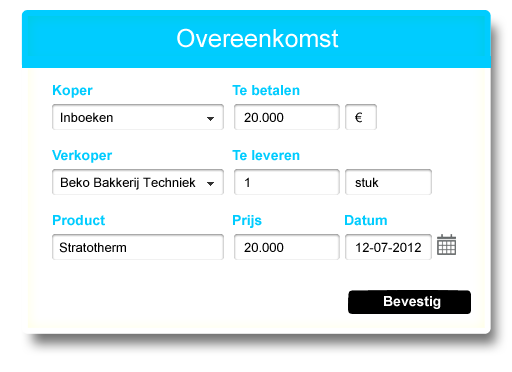
<style>
.page{position:relative;width:512px;height:372px;background:#ffffff}
.page>*{position:absolute;margin:0}
.t1{font:25px "ArialMT";color:#ffffff}
.t2{font:14px "Arial-BoldMT";color:#00ccff}
.t3{font:13px "ArialMT";color:#000000}
.t4{font:14px "Arial-BoldMT";color:#ffffff}
</style>
<div class="page">
<p class="t1" style="left:177px;top:28px;width:162px;height:20px">Overeenkomst</p>
<p class="t2" style="left:53px;top:85px;width:40px;height:13px">Koper</p>
<p class="t2" style="left:232px;top:85px;width:68px;height:11px">Te betalen</p>
<p class="t3" style="left:244px;top:112px;width:40px;height:10px">20.000</p>
<p class="t2" style="left:52px;top:150px;width:61px;height:13px">Verkoper</p>
<p class="t2" style="left:232px;top:150px;width:68px;height:11px">Te leveren</p>
<p class="t2" style="left:53px;top:215px;width:52px;height:11px">Product</p>
<p class="t2" style="left:233px;top:215px;width:29px;height:13px">Prijs</p>
<p class="t2" style="left:345px;top:215px;width:42px;height:11px">Datum</p>
<p class="t3" style="left:59px;top:242px;width:67px;height:11px">Stratotherm</p>
<p class="t3" style="left:244px;top:242px;width:40px;height:10px">20.000</p>
<p class="t4" style="left:384px;top:296px;width:57px;height:13px">Bevestig</p>
</div>
